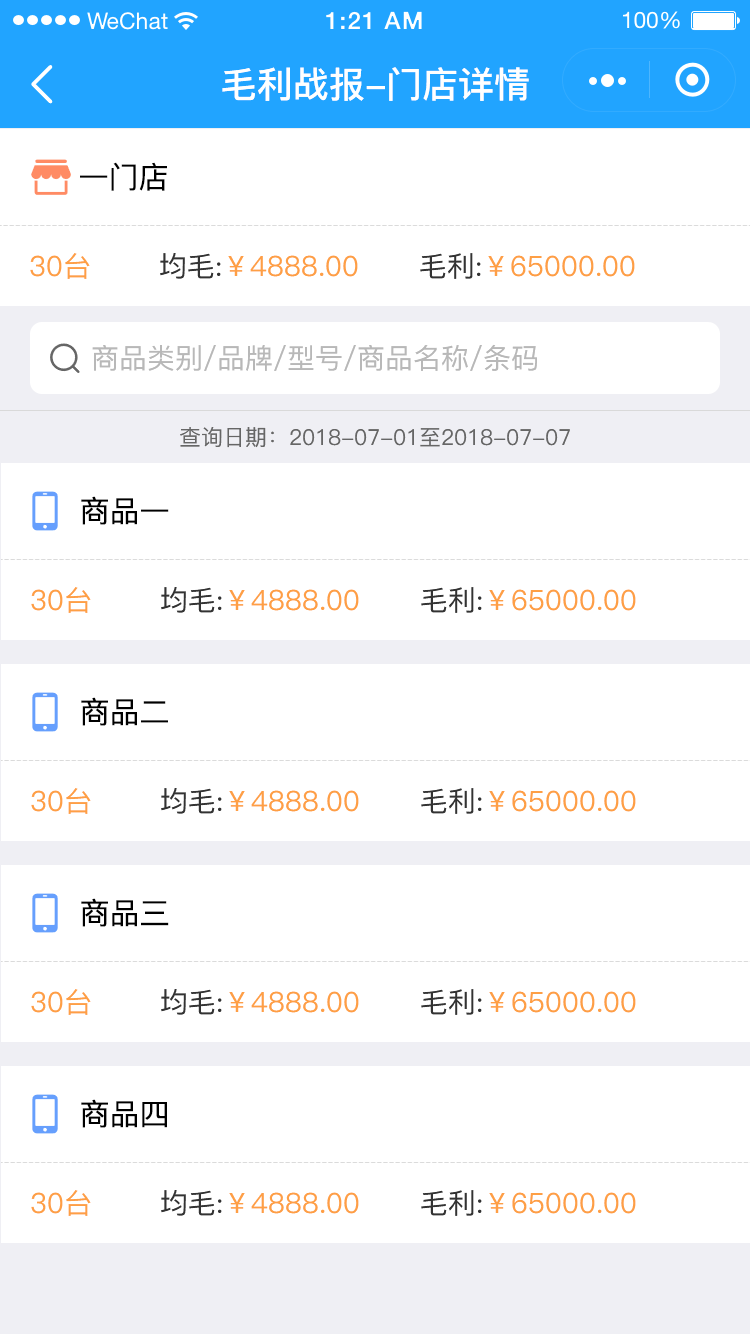
<style>
.page{position:relative;width:750px;height:1334px;background:#ffffff}
.page>*{position:absolute;margin:0}
.t1{font:36px "PingFang-SC-Bold";color:#ffffff}
.t2{font:30px "PingFang-SC-Medium";color:#000000}
.t3{font:28px "PingFang-SC-Medium";color:#fe9f45}
.t4{font:28px "PingFang-SC-Medium";color:#333333}
.t5{font:28px "PingFang-SC-Medium";color:#b8b8b8}
.t6{font:22px "PingFang-SC-Medium";color:#666666}
</style>
<div class="page">
<p class="t1" style="left:222px;top:67px;width:307px;height:34px">毛利战报-门店详情</p>
<p class="t2" style="left:80px;top:162px;width:87px;height:29px">一门店</p>
<p class="t3" style="left:30px;top:253px;width:60px;height:26px">30台</p>
<p class="t3" style="left:160px;top:253px;width:198px;height:26px"><span class="t4">均毛:</span>￥4888.00</p>
<p class="t3" style="left:420px;top:253px;width:215px;height:26px"><span class="t4">毛利:</span>￥65000.00</p>
<p class="t5" style="left:92px;top:344px;width:445px;height:27px">商品类别/品牌/型号/商品名称/条码</p>
<p class="t6" style="left:180px;top:427px;width:390px;height:21px">查询日期：2018-07-01至2018-07-07</p>
<p class="t2" style="left:81px;top:496px;width:88px;height:29px">商品一</p>
<p class="t3" style="left:31px;top:587px;width:60px;height:26px">30台</p>
<p class="t3" style="left:161px;top:587px;width:198px;height:26px"><span class="t4">均毛:</span>￥4888.00</p>
<p class="t3" style="left:421px;top:587px;width:215px;height:26px"><span class="t4">毛利:</span>￥65000.00</p>
<p class="t2" style="left:81px;top:697px;width:87px;height:29px">商品二</p>
<p class="t3" style="left:31px;top:788px;width:60px;height:26px">30台</p>
<p class="t3" style="left:161px;top:788px;width:198px;height:26px"><span class="t4">均毛:</span>￥4888.00</p>
<p class="t3" style="left:421px;top:788px;width:215px;height:26px"><span class="t4">毛利:</span>￥65000.00</p>
<p class="t2" style="left:81px;top:898px;width:88px;height:29px">商品三</p>
<p class="t3" style="left:31px;top:989px;width:60px;height:26px">30台</p>
<p class="t3" style="left:161px;top:989px;width:198px;height:26px"><span class="t4">均毛:</span>￥4888.00</p>
<p class="t3" style="left:421px;top:989px;width:215px;height:26px"><span class="t4">毛利:</span>￥65000.00</p>
<p class="t2" style="left:81px;top:1099px;width:86px;height:29px">商品四</p>
<p class="t3" style="left:31px;top:1190px;width:60px;height:26px">30台</p>
<p class="t3" style="left:161px;top:1190px;width:198px;height:26px"><span class="t4">均毛:</span>￥4888.00</p>
<p class="t3" style="left:421px;top:1190px;width:215px;height:26px"><span class="t4">毛利:</span>￥65000.00</p>
</div>
